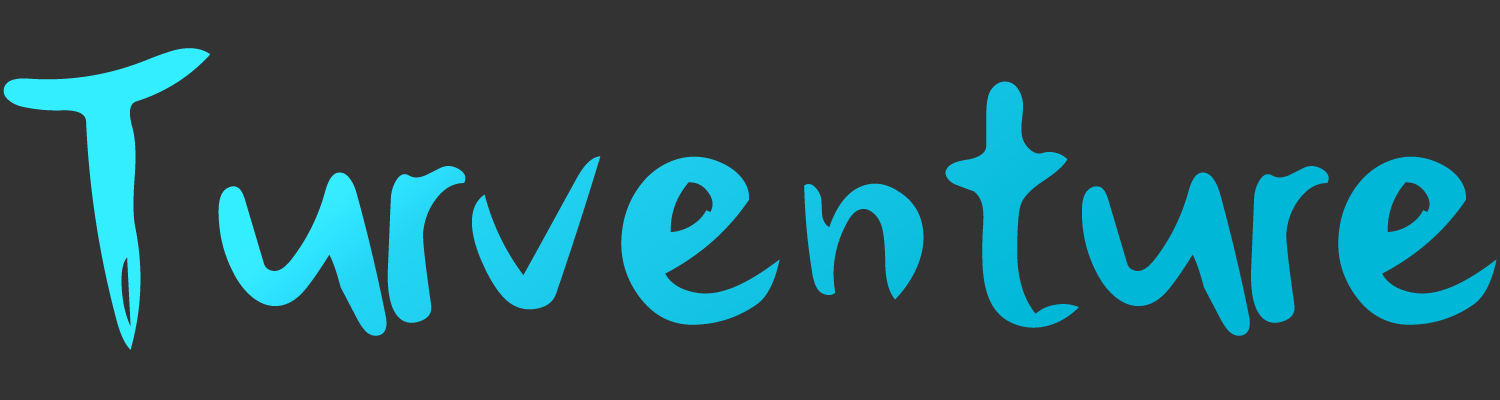
<style>
.page{position:relative;width:1500px;height:400px;background:#333333}
.page>*{position:absolute;margin:0}
.t1{font:333.3px "SentyGoldenBell";color:#14c4e3}
</style>
<div class="page">
<p class="t1" style="left:3px;top:48px;width:1494px;height:302px">Turventure</p>
</div>
